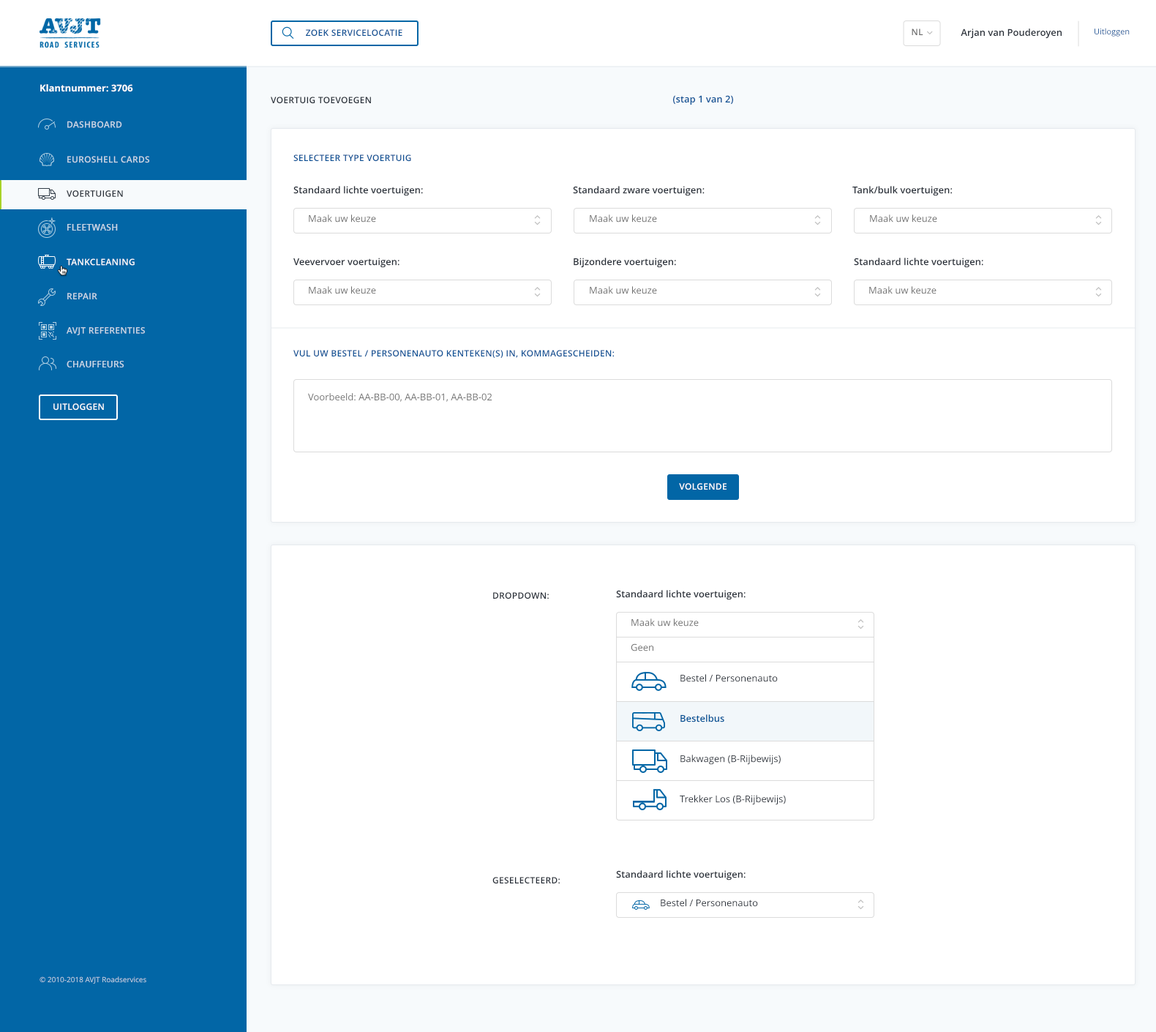
<style>
.page{position:relative;width:1156px;height:1032px;background:#ffffff}
.page>*{position:absolute;margin:0}
.t1{font:8.8px "OpenSans-Semibold";letter-spacing:0.023em;color:#0b5195;text-transform:uppercase}
.t2{font:8.8px "OpenSans-Semibold";letter-spacing:0.023em;color:#6d6d6d;text-transform:uppercase}
.t3{font:9.5px "OpenSans-Semibold";color:#262d37}
.t4{font:8px "OpenSans"}
.t5{font:9.5px "OpenSans-Bold";color:#ffffff}
.t6{font:8.8px "OpenSans-Semibold";letter-spacing:0.023em;color:#262d37;text-transform:uppercase}
.t7{font:9.5px "OpenSans-Semibold";color:#0b5195}
.t8{font:8.8px "OpenSans-Semibold";letter-spacing:0.023em;color:#cbd8e6;text-transform:uppercase}
.t9{font:9.5px "OpenSans";color:#6d6d6d}
.t10{font:8.8px "OpenSans-Semibold";letter-spacing:0.023em;color:#cbd9e7;text-transform:uppercase}
.t11{font:8.8px "OpenSans-Semibold";letter-spacing:0.023em;color:#ffffff;text-transform:uppercase}
.t12{font:9.5px "OpenSans";color:#262d37}
.t13{font:9.5px "OpenSans-Semibold";color:#005396}
.t14{font:9.5px "OpenSans";color:#282f38}
.t15{font:7.3px "OpenSans"}
</style>
<div class="page">
<p class="t1" style="left:306px;top:29px;width:96px;height:8px">zoek servicelocatie</p>
<p class="t2" style="left:912px;top:29px;width:11px;height:6px">NL</p>
<p class="t3" style="left:961px;top:29px;width:101px;height:10px">Arjan van Pouderoyen</p>
<p class="t4" style="left:1094px;top:28px;width:36px;height:9px">Uitloggen</p>
<p class="t5" style="left:40px;top:84px;width:93px;height:8px">Klantnummer: 3706</p>
<p class="t6" style="left:271px;top:97px;width:100px;height:7px">Voertuig toevoegen</p>
<p class="t7" style="left:673px;top:95px;width:60px;height:10px">(stap 1 van 2)</p>
<p class="t8" style="left:67px;top:121px;width:55px;height:7px">dashboard</p>
<p class="t8" style="left:67px;top:156px;width:83px;height:7px">EuroShell Cards</p>
<p class="t1" style="left:293px;top:154px;width:118px;height:8px">selecteer type voertuig</p>
<p class="t3" style="left:293px;top:186px;width:130px;height:10px">Standaard lichte voertuigen:</p>
<p class="t3" style="left:573px;top:186px;width:132px;height:10px">Standaard zware voertuigen:</p>
<p class="t3" style="left:852px;top:186px;width:101px;height:10px">Tank/bulk voertuigen:</p>
<p class="t6" style="left:67px;top:190px;width:56px;height:7px">voertuigen</p>
<p class="t9" style="left:309px;top:214px;width:67px;height:8px">Maak uw keuze</p>
<p class="t9" style="left:590px;top:214px;width:67px;height:8px">Maak uw keuze</p>
<p class="t9" style="left:870px;top:214px;width:67px;height:8px">Maak uw keuze</p>
<p class="t10" style="left:67px;top:224px;width:51px;height:6px">fleetwash</p>
<p class="t3" style="left:293px;top:258px;width:106px;height:10px">Veevervoer voertuigen:</p>
<p class="t3" style="left:574px;top:258px;width:102px;height:10px">Bijzondere voertuigen:</p>
<p class="t3" style="left:854px;top:258px;width:129px;height:10px">Standaard lichte voertuigen:</p>
<p class="t11" style="left:67px;top:258px;width:68px;height:8px">tankcleaning</p>
<p class="t8" style="left:67px;top:293px;width:30px;height:6px">repair</p>
<p class="t9" style="left:309px;top:286px;width:67px;height:8px">Maak uw keuze</p>
<p class="t9" style="left:590px;top:286px;width:67px;height:8px">Maak uw keuze</p>
<p class="t9" style="left:869px;top:286px;width:67px;height:8px">Maak uw keuze</p>
<p class="t10" style="left:67px;top:326px;width:78px;height:10px">avjt referenties</p>
<p class="t1" style="left:293px;top:350px;width:322px;height:8px">Vul uw bestel / Personenauto kenteken(s) in, kommagescheiden:</p>
<p class="t10" style="left:67px;top:361px;width:57px;height:6px">chauffeurs</p>
<p class="t9" style="left:308px;top:393px;width:184px;height:9px">Voorbeeld: AA-BB-00, AA-BB-01, AA-BB-02</p>
<p class="t11" style="left:53px;top:403px;width:51px;height:7px">uitloggen</p>
<p class="t11" style="left:679px;top:483px;width:47px;height:7px">volgende</p>
<p class="t6" style="left:493px;top:592px;width:56px;height:7px">DROPDOWN:</p>
<p class="t3" style="left:616px;top:590px;width:130px;height:10px">Standaard lichte voertuigen:</p>
<p class="t9" style="left:631px;top:618px;width:68px;height:8px">Maak uw keuze</p>
<p class="t9" style="left:631px;top:643px;width:22px;height:8px">Geen</p>
<p class="t12" style="left:680px;top:674px;width:98px;height:8px">Bestel / Personenauto</p>
<p class="t13" style="left:680px;top:714px;width:44px;height:8px">Bestelbus</p>
<p class="t14" style="left:680px;top:754px;width:101px;height:11px">Bakwagen (B-Rijbewijs)</p>
<p class="t12" style="left:680px;top:795px;width:106px;height:10px">Trekker Los (B-Rijbewijs)</p>
<p class="t3" style="left:616px;top:870px;width:130px;height:10px">Standaard lichte voertuigen:</p>
<p class="t6" style="left:492px;top:876px;width:68px;height:8px">GESELECTEERD:</p>
<p class="t12" style="left:661px;top:898px;width:97px;height:8px">Bestel / Personenauto</p>
<p class="t15" style="left:40px;top:976px;width:106px;height:7px">© 2010-2018 AVJT Roadservices</p>
</div>
